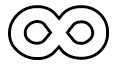
<style>
.page{position:relative;width:128px;height:64px;background:#ffffff}
.page>*{position:absolute;margin:0}
.t1{font:102.1px "HGPSoeiKakugothicUB";letter-spacing:0.05em;color:#ffffff;scale:1.08 1}
</style>
<div class="page">
<p class="t1" style="left:11px;top:8px;width:95px;height:49px">∞</p>
</div>
